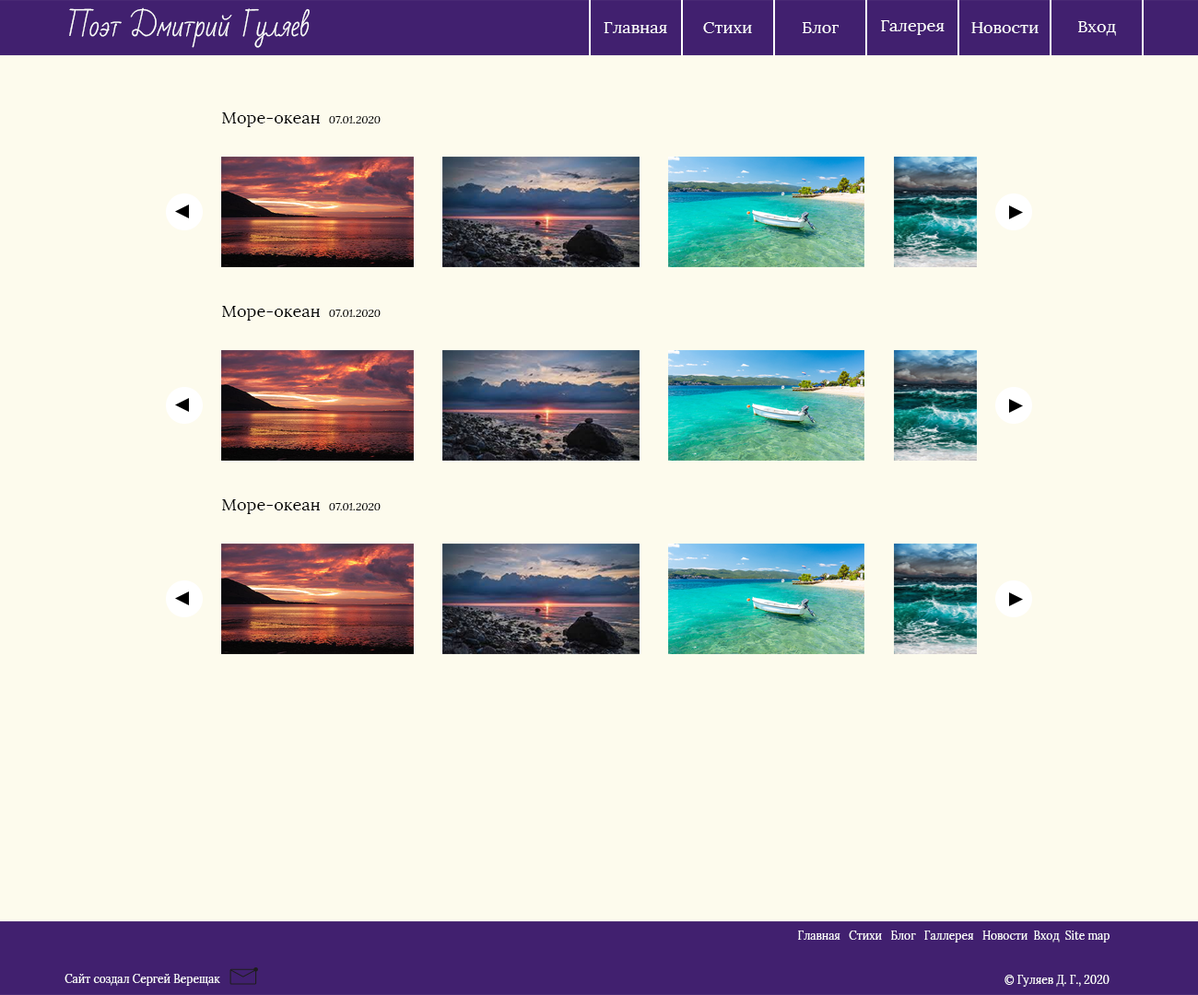
<style>
.page{position:relative;width:1198px;height:995px;background:#fdfbed}
.page>*{position:absolute;margin:0}
.t1{font:27.6px "BadScript-Regular";color:#ffffff}
.t2{font:16.6px "Lora-Regular";color:#ffffff}
.t3{font:16.6px "Lora-Regular";letter-spacing:0.005em;color:#000000}
.t4{font:11.1px "Lora-Italic";letter-spacing:0.005em;color:#000000}
.t5{font:11.1px "Lora-Regular";color:#ffffff}
</style>
<div class="page">
<p class="t1" style="left:69px;top:7px;width:241px;height:41px">Поэт Дмитрий Гуляев</p>
<p class="t2" style="left:604px;top:22px;width:63px;height:11px">Главная</p>
<p class="t2" style="left:703px;top:22px;width:49px;height:11px">Стихи</p>
<p class="t2" style="left:802px;top:22px;width:37px;height:11px">Блог</p>
<p class="t2" style="left:881px;top:20px;width:64px;height:15px">Галерея</p>
<p class="t2" style="left:971px;top:22px;width:68px;height:11px">Новости</p>
<p class="t2" style="left:1078px;top:21px;width:38px;height:15px">Вход</p>
<p class="t3" style="left:222px;top:112px;width:98px;height:15px">Море-океан</p>
<p class="t4" style="left:329px;top:116px;width:52px;height:7px">07.01.2020</p>
<p class="t3" style="left:222px;top:306px;width:98px;height:15px">Море-океан</p>
<p class="t4" style="left:329px;top:310px;width:52px;height:7px">07.01.2020</p>
<p class="t3" style="left:222px;top:499px;width:98px;height:15px">Море-океан</p>
<p class="t4" style="left:329px;top:503px;width:52px;height:8px">07.01.2020</p>
<p class="t5" style="left:798px;top:931px;width:312px;height:12px">Главная   Стихи   Блог   Галлерея   Новости  Вход  Site map</p>
<p class="t5" style="left:65px;top:974px;width:155px;height:12px">Сайт создал Сергей Верещак</p>
<p class="t5" style="left:1005px;top:975px;width:105px;height:12px">© Гуляев Д. Г., 2020</p>
</div>
